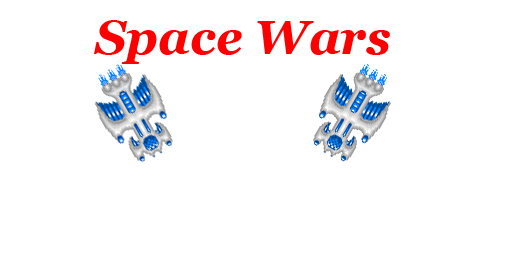
<style>
.page{position:relative;width:512px;height:256px;background:#ffffff}
.page>*{position:absolute;margin:0}
.t1{font:48px "Georgia-BoldItalic";color:#ff0000}
</style>
<div class="page">
<p class="t1" style="left:94px;top:20px;width:296px;height:44px">Space Wars</p>
</div>
